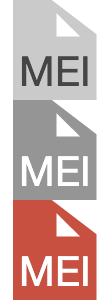
<style>
.page{position:relative;width:100px;height:300px;background:#ffffff}
.page>*{position:absolute;margin:0}
.t1{font:40.9px "HelveticaNeue";color:#454545}
.t2{font:40.9px "HelveticaNeue";color:#ffffff}
</style>
<div class="page">
<p class="t1" style="left:21px;top:56px;width:67px;height:30px">MEI</p>
<p class="t2" style="left:21px;top:156px;width:67px;height:30px">MEI</p>
<p class="t2" style="left:21px;top:256px;width:67px;height:30px">MEI</p>
</div>
